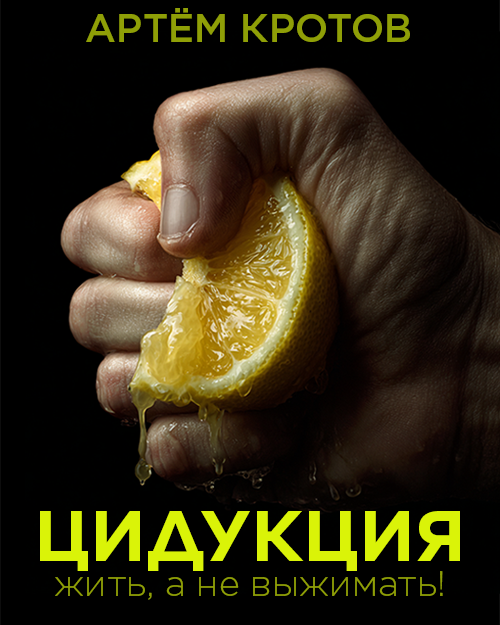
<style>
.page{position:relative;width:500px;height:625px;background:#000000}
.page>*{position:absolute;margin:0}
.t1{font:39.2px "Gotham-Medium";color:#8f9f07}
.t2{font:70.8px "Gotham-Bold";color:#daf308}
.t3{font:35.6px "Gotham-Light";color:#8f9f07}
</style>
<div class="page">
<p class="t1" style="left:86px;top:8px;width:324px;height:34px">АРТЁМ КРОТОВ</p>
<p class="t2" style="left:40px;top:511px;width:420px;height:60px">ЦИДУКЦИЯ</p>
<p class="t3" style="left:55px;top:571px;width:388px;height:29px">жить, а не выжимать!</p>
</div>
